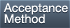
<style>
.page{position:relative;width:70px;height:28px}
.page>*{position:absolute;margin:0}
.t1{font:12px/11px "HelveticaNeue";color:#ffffff}
</style>
<div class="page">
<p class="t1" style="left:3px;top:3px;width:65px;height:21px">Acceptance<br>Method</p>
</div>
